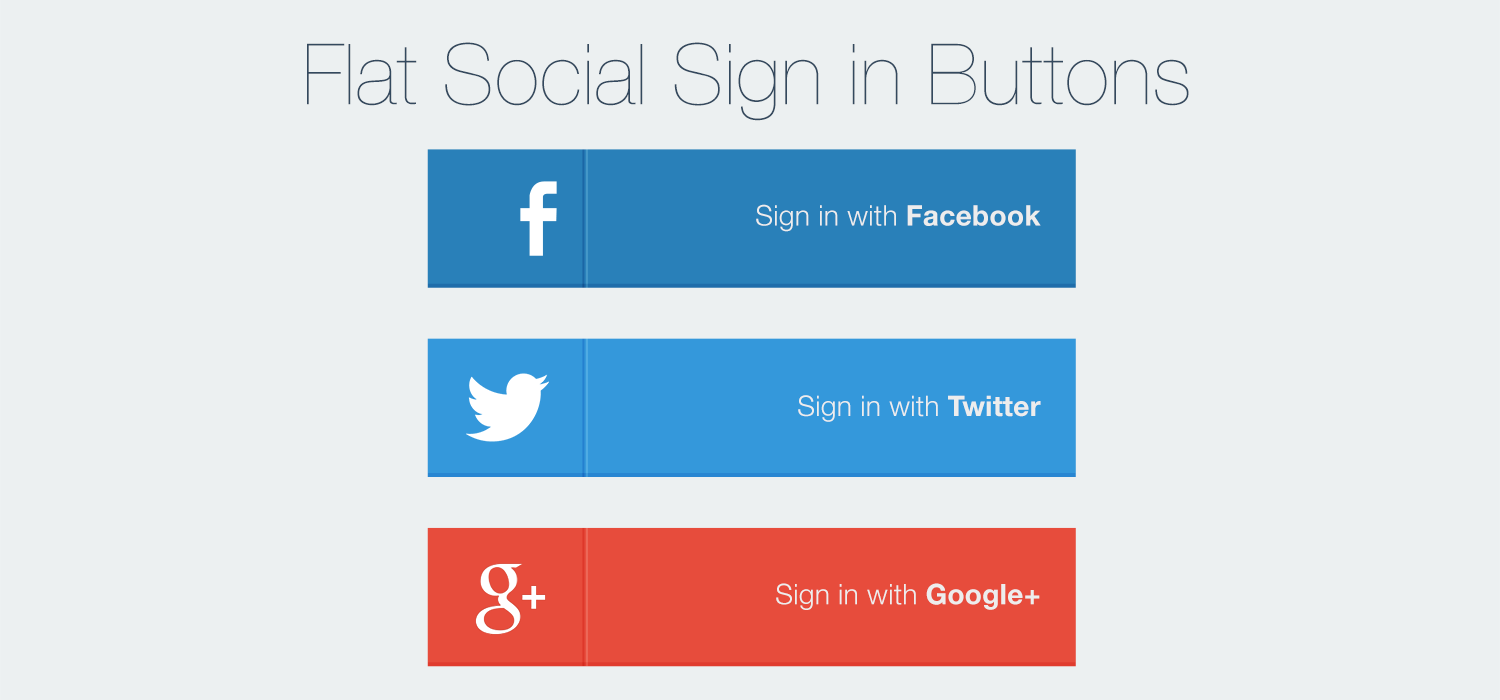
<style>
.page{position:relative;width:1500px;height:700px;background:#ecf0f1}
.page>*{position:absolute;margin:0}
.t1{font:84.4px "HelveticaNeue-UltraLight";letter-spacing:0.01em;color:#34495e}
.t2{font:14.1px "HelveticaNeue-Light";letter-spacing:0.01em;color:#ededed}
.t3{font:14.1px "HelveticaNeue-Bold";letter-spacing:0.01em;color:#ededed}
</style>
<div class="page">
<p class="t1" style="left:307px;top:42px;width:882px;height:79px">Flat Social Sign in Buttons</p>
<p class="t2" style="left:756px;top:204px;width:285px;height:28px;text-align:right">Sign in with <span class="t3">Facebook</span></p>
<p class="t2" style="left:798px;top:395px;width:243px;height:27px;text-align:right">Sign in with <span class="t3">Twitter</span></p>
<p class="t2" style="left:776px;top:583px;width:264px;height:27px;text-align:right">Sign in with <span class="t3">Google+</span></p>
</div>
